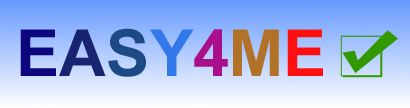
<style>
.page{position:relative;width:410px;height:108px}
.page>*{position:absolute;margin:0}
.t1{font:65px "Arial-BoldMT";color:#0e067e}
.t2{font:65px "Arial-BoldMT";color:#18246f}
.t3{font:65px "Arial-BoldMT";color:#1d4985}
.t4{font:65px "Arial-BoldMT";color:#3278ea}
.t5{font:65px "Arial-BoldMT";color:#aa0f8b}
.t6{font:65px "Arial-BoldMT";color:#b17126}
.t7{font:65px "Arial-BoldMT";color:#ff1010}
</style>
<div class="page">
<p class="t1" style="left:20px;top:28px;width:303px;height:49px">E<span class="t2">A</span><span class="t3">S</span><span class="t4">Y</span><span class="t5">4</span><span class="t6">M</span><span class="t7">E</span></p>
</div>
